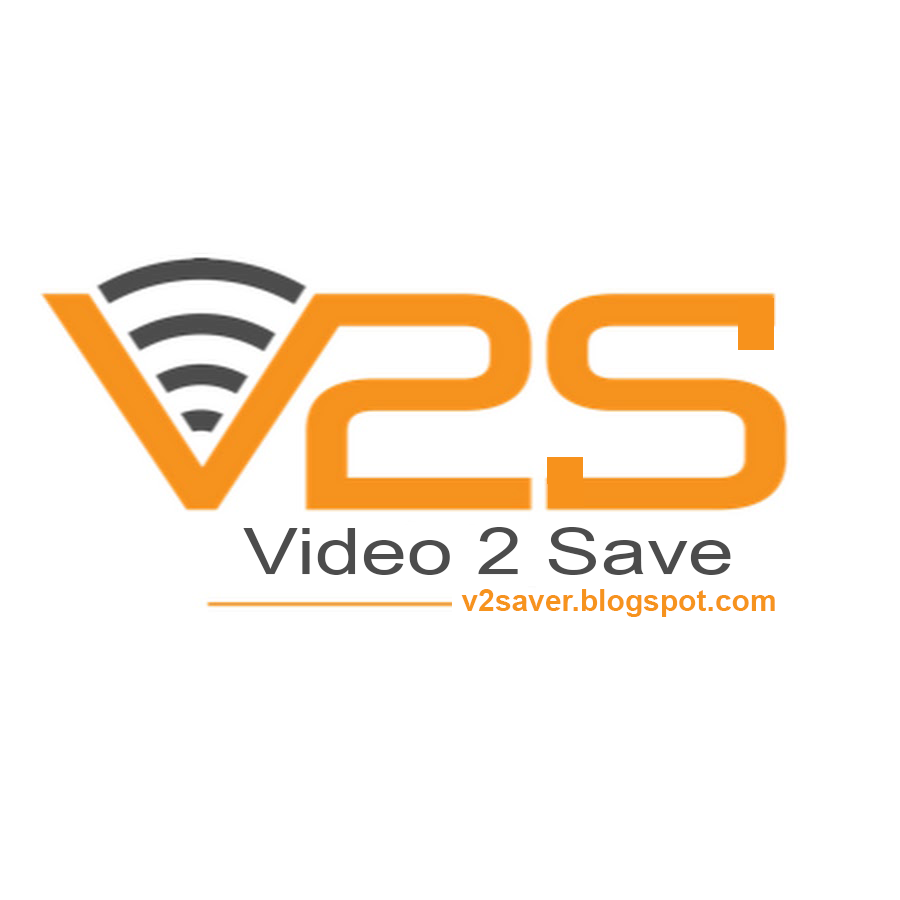
<style>
.page{position:relative;width:900px;height:900px;background:#ffffff}
.page>*{position:absolute;margin:0}
.t1{font:64.4px "ArialNarrow";color:#4c4c4c;scale:1.57 1}
.t2{font:30px "Arial-BoldMT";color:#f6931e}
</style>
<div class="page">
<p class="t1" style="left:243px;top:527px;width:488px;height:48px">Video 2 Save</p>
<p class="t2" style="left:461px;top:589px;width:314px;height:28px">v2saver.blogspot.com</p>
</div>
